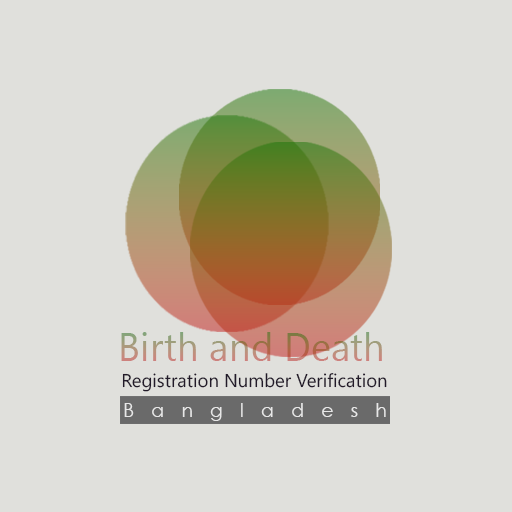
<style>
.page{position:relative;width:512px;height:512px;background:#e0e0dc}
.page>*{position:absolute;margin:0}
.t1{font:38.7px "NirmalaUI"}
.t2{font:18.6px "NirmalaUI";color:#221a29}
.t3{font:18.6px "CenturyGothic";letter-spacing:0.94em;color:#e7e7e7}
</style>
<div class="page">
<p class="t1" style="left:121px;top:332px;width:261px;height:29px">Birth and Death</p>
<p class="t2" style="left:122px;top:373px;width:265px;height:19px">Registration Number Verification</p>
<p class="t3" style="left:124px;top:403px;width:262px;height:18px">Bangladesh</p>
</div>
